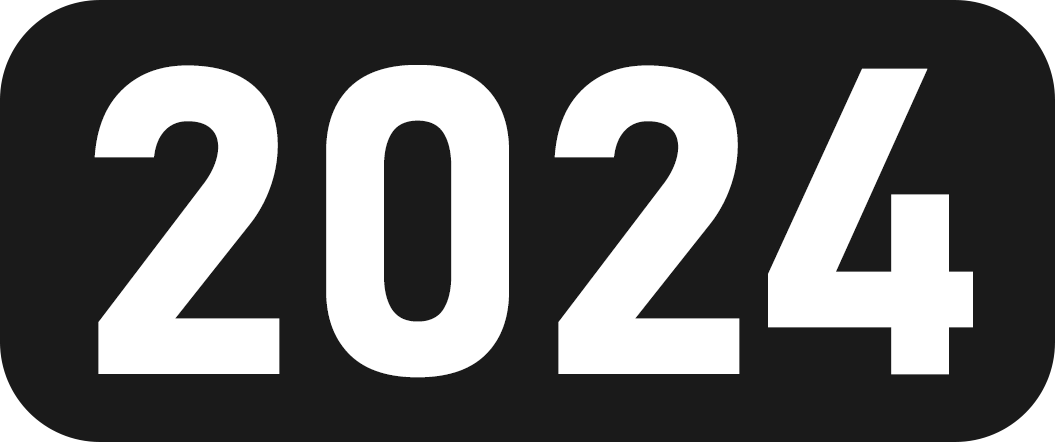
<style>
.page{position:relative;width:1055px;height:442px;background:#1a1a1a}
.page>*{position:absolute;margin:0}
.t1{font:429.9px "Bahnschrift-Bold";color:#ffffff}
</style>
<div class="page">
<p class="t1" style="left:94px;top:65px;width:879px;height:313px">2024</p>
</div>
